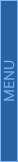
<style>
.page{position:relative;width:18px;height:162px;background:#2662a4}
.page>*{position:absolute;margin:0}
.t1{font:14px "Muli-Light";color:#7eb4f2}
</style>
<div class="page">
<p class="t1" style="left:3px;top:60px;width:12px;height:41px;rotate:-90deg">MENU</p>
</div>
